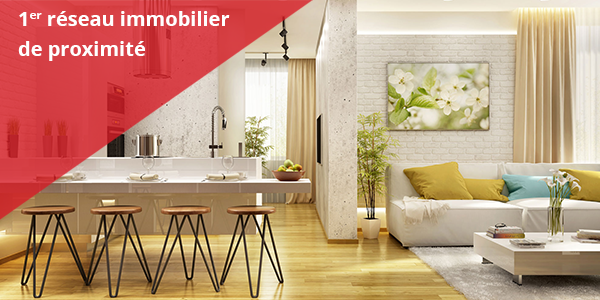
<style>
.page{position:relative;width:600px;height:300px}
.page>*{position:absolute;margin:0}
.t1{font:20px/30px "OpenSans-Bold";color:#ffffff}
</style>
<div class="page">
<p class="t1" style="left:18px;top:11px;width:212px;height:50px;text-align:justify">1er réseau immobilier <br>de proximité</p>
</div>
